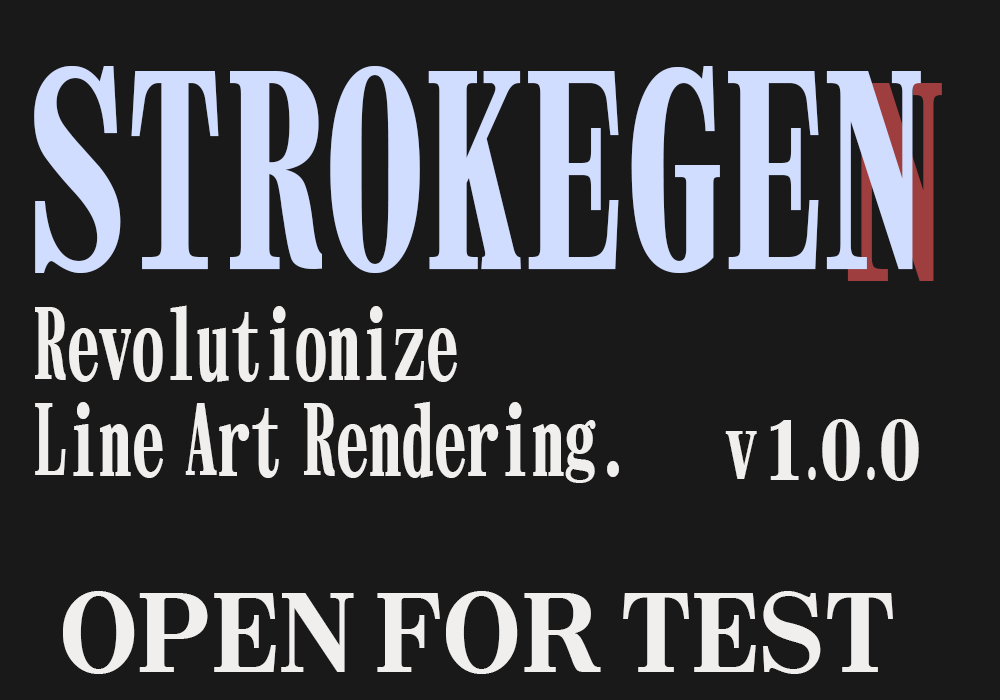
<style>
.page{position:relative;width:1000px;height:700px;background:#191919}
.page>*{position:absolute;margin:0}
.t1{font:240px "NIS-M9-83pv-RKSJ-H";letter-spacing:0.02em;color:#d1ddfe;scale:0.8 1}
.t2{font:240px "NIS-M9-83pv-RKSJ-H";letter-spacing:0.02em;scale:0.8 1}
.t3{font:88px/96px "NIS-M9-83pv-RKSJ-H";letter-spacing:0.01em;color:#f1eeee;scale:0.73 1}
.t4{font:57.6px "NIS-M9-83pv-RKSJ-H";letter-spacing:-0.01em;color:#f1eeee;scale:1.11 1}
.t5{font:72px "NIS-M9-83pv-RKSJ-H";letter-spacing:-0.01em;color:#f1eeee;scale:1.11 1}
.t6{font:72px "NIS-M9-83pv-RKSJ-H";letter-spacing:-0.01em;color:#f1eeee;scale:0.56 1}
.t7{font:96px "NIS-M9P-83pv-RKSJ-H";letter-spacing:-0.01em;color:#f1eeee}
</style>
<div class="page">
<p class="t1" style="left:34px;top:66px;width:887px;height:207px">STROKEGEN</p>
<p class="t2" style="left:847px;top:83px;width:95px;height:198px">N</p>
<p class="t3" style="left:35px;top:305px;width:584px;height:178px">Revolutionize <br>Line Art Rendering.</p>
<p class="t4" style="left:725px;top:419px;width:194px;height:62px">V <span class="t5">1</span><span class="t6">.</span><span class="t5">0</span><span class="t6">.</span><span class="t5">0</span></p>
<p class="t7" style="left:63px;top:591px;width:830px;height:83px">OPEN FOR TEST</p>
</div>
